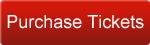
<style>
.page{position:relative;width:150px;height:45px}
.page>*{position:absolute;margin:0}
.t1{font:18px "ArialMT";color:#ffffff}
</style>
<div class="page">
<p class="t1" style="left:7px;top:15px;width:137px;height:14px">Purchase Tickets</p>
</div>
